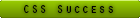
<style>
.page{position:relative;width:140px;height:18px}
.page>*{position:absolute;margin:0}
.t1{font:12px "OratorStd";letter-spacing:0.1em;color:#000000}
</style>
<div class="page">
<p class="t1" style="left:24px;top:5px;width:89px;height:8px">CSS Success</p>
</div>
